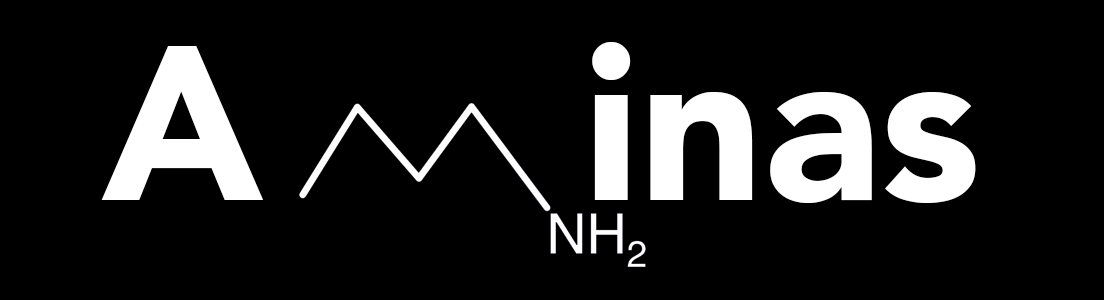
<style>
.page{position:relative;width:1104px;height:300px;background:#000000}
.page>*{position:absolute;margin:0}
.t1{font:216.7px "Avenir-Black";color:#ffffff}
</style>
<div class="page">
<p class="t1" style="left:101px;top:42px;width:875px;height:161px">A     inas</p>
</div>
